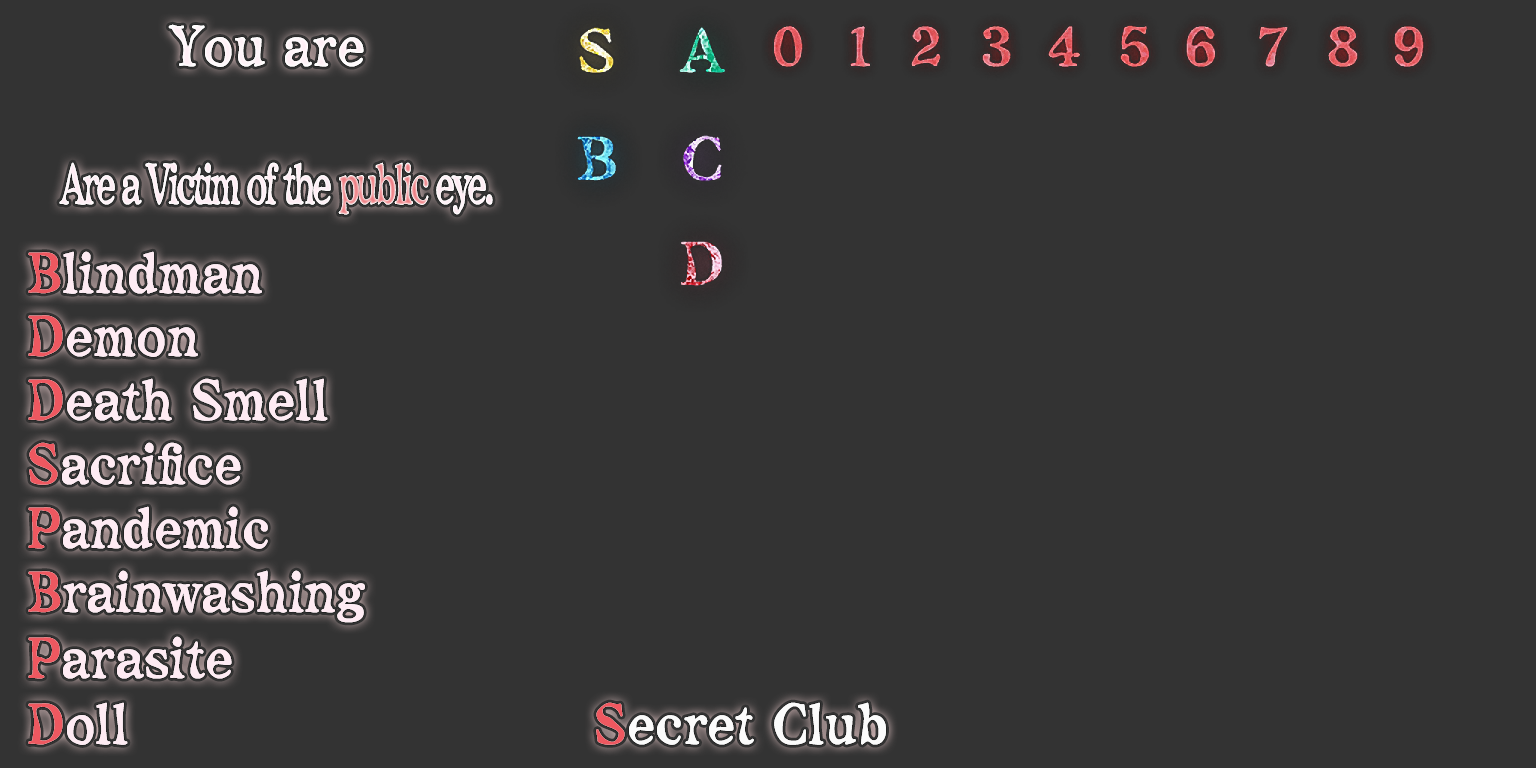
<style>
.page{position:relative;width:1536px;height:768px;background:#333333}
.page>*{position:absolute;margin:0}
.t1{font:56px "maidouComicMystery";color:#feebf3;scale:0.9 1}
.t2{font:56px "maidouComicMystery";letter-spacing:-0.1em;color:#feebf3;scale:0.64 1}
.t3{font:56px "maidouComicMystery";letter-spacing:-0.1em;color:#ee8085;scale:0.64 1}
.t4{font:56px "maidouComicMystery";color:#ee5860;scale:0.9 1}
.t5{font:56px "maidouComicMystery";scale:0.9 1}
.t6{font:56px "maidouComicMystery";color:#fbfbfb;scale:0.9 1}
</style>
<div class="page">
<p class="t1" style="left:168px;top:24px;width:196px;height:43px">You are</p>
<p class="t1" style="left:168px;top:24px;width:196px;height:43px">You are</p>
<p class="t2" style="left:59px;top:162px;width:434px;height:53px">Are a Victim of the <span class="t3">public</span> eye.</p>
<p class="t2" style="left:59px;top:162px;width:434px;height:53px">Are a Victim of the <span class="t3">public</span> eye.</p>
<p class="t1" style="left:28px;top:251px;width:234px;height:43px"><span class="t4">B</span>lindman</p>
<p class="t1" style="left:28px;top:251px;width:234px;height:43px"><span class="t4">B</span>lindman</p>
<p class="t1" style="left:28px;top:315px;width:170px;height:42px">Demon</p>
<p class="t1" style="left:28px;top:315px;width:170px;height:42px"><span class="t4">D</span>emon</p>
<p class="t1" style="left:28px;top:378px;width:300px;height:43px"><span class="t4">D</span>eath Smell</p>
<p class="t1" style="left:28px;top:378px;width:300px;height:43px"><span class="t4">D</span>eath Smell</p>
<p class="t1" style="left:29px;top:442px;width:212px;height:43px">Sacrifice</p>
<p class="t1" style="left:29px;top:442px;width:212px;height:43px"><span class="t4">S</span>acrifice</p>
<p class="t1" style="left:28px;top:506px;width:240px;height:43px">Pandemic</p>
<p class="t1" style="left:28px;top:506px;width:240px;height:43px"><span class="t4">P</span>andemic</p>
<p class="t1" style="left:28px;top:570px;width:337px;height:53px">Brainwashing</p>
<p class="t1" style="left:28px;top:570px;width:337px;height:53px"><span class="t4">B</span>rainwashing</p>
<p class="t1" style="left:28px;top:636px;width:204px;height:43px">Parasite</p>
<p class="t1" style="left:28px;top:636px;width:204px;height:43px"><span class="t4">P</span>arasite</p>
<p class="t5" style="left:28px;top:702px;width:100px;height:43px">Doll</p>
<p class="t1" style="left:28px;top:702px;width:100px;height:43px"><span class="t4">D</span>oll</p>
<p class="t6" style="left:596px;top:702px;width:290px;height:43px">Secret Club</p>
<p class="t6" style="left:596px;top:702px;width:290px;height:43px"><span class="t4">S</span>ecret Club</p>
</div>
